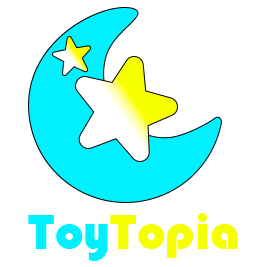
<style>
.page{position:relative;width:265px;height:267px;background:#ffffff}
.page>*{position:absolute;margin:0}
.t1{font:51.2px "Bauhaus93";color:#f6ff00}
.t2{font:51.2px "Bauhaus93";color:#00f0ff}
</style>
<div class="page">
<p class="t1" style="left:28px;top:213px;width:210px;height:48px"><span class="t2">Toy</span>Topia</p>
</div>
